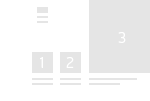
<style>
.page{position:relative;width:150px;height:101px;background:#ffffff}
.page>*{position:absolute;margin:0}
.t1{font:15px "Neris-Light";letter-spacing:0.05em;color:#ffffff}
</style>
<div class="page">
<p class="t1" style="left:118px;top:32px;width:8px;height:11px">3</p>
<p class="t1" style="left:40px;top:57px;width:3px;height:11px">1</p>
<p class="t1" style="left:66px;top:57px;width:8px;height:11px">2</p>
</div>
